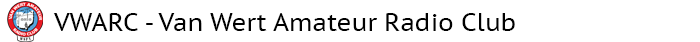
<style>
.page{position:relative;width:700px;height:42px;background:#ffffff}
.page>*{position:absolute;margin:0}
.t1{font:24.8px "PTSans-Caption";color:#000000}
</style>
<div class="page">
<p class="t1" style="left:53px;top:13px;width:462px;height:18px">VWARC - Van Wert Amateur Radio Club</p>
</div>
